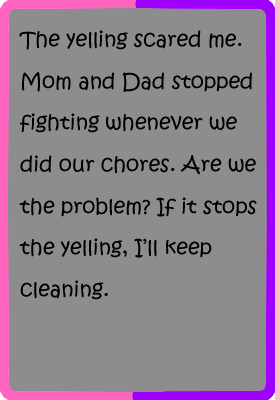
<style>
.page{position:relative;width:275px;height:400px;background:#8d8d8d}
.page>*{position:absolute;margin:0}
.t1{font:20.8px/41.7px "KristenITC-Regular";color:#000000}
</style>
<div class="page">
<p class="t1" style="left:19px;top:30px;width:238px;height:270px">The yelling scared me. <br>Mom and Dad stopped<br>fighting whenever we<br>did our chores. Are we<br>the problem? If it stops<br>the yelling, I’ll keep<br>cleaning.</p>
</div>
